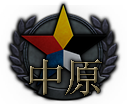
<style>
.page{position:relative;width:127px;height:104px}
.page>*{position:absolute;margin:0}
.t1{font:38.5px "STSongti-SC-Bold"}
</style>
<div class="page">
<p class="t1" style="left:29px;top:59px;width:73px;height:37px">中原</p>
</div>
